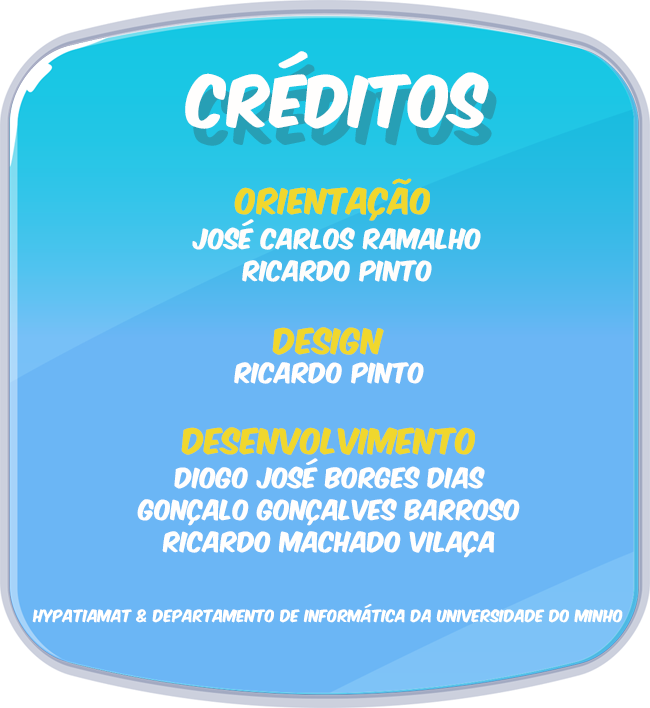
<style>
.page{position:relative;width:650px;height:708px;background:#6bb6f5}
.page>*{position:absolute;margin:0}
.t1{font:60.5px "KomikaAxis";color:#fffefd}
.t2{font:63.9px "KomikaAxis";color:#279fb5;scale:0.95 1}
.t3{font:30.4px "KomikaAxis";color:#f0d72d}
.t4{font:23.8px/31.7px "KomikaAxis";color:#fefdfb}
.t5{font:23.8px "KomikaAxis";color:#fffefd}
.t6{font:23.8px/31.7px "KomikaAxis";color:#fffefd}
.t7{font:14.5px "KomikaAxis";color:#fffffe}
</style>
<div class="page">
<p class="t1" style="left:185px;top:51px;width:304px;height:78px">Créditos</p>
<p class="t2" style="left:193px;top:64px;width:304px;height:82px">Créditos</p>
<p class="t3" style="left:234px;top:178px;width:196px;height:43px">Orientação</p>
<p class="t4" style="left:192px;top:219px;width:289px;height:63px;text-align:center">José carlos ramalho<br>ricardo pinto</p>
<p class="t3" style="left:272px;top:327px;width:112px;height:28px">dESIGN</p>
<p class="t5" style="left:234px;top:362px;width:190px;height:22px">rICARDO pINTO</p>
<p class="t3" style="left:181px;top:427px;width:294px;height:28px">dESENVOLVIMENTO</p>
<p class="t6" style="left:137px;top:458px;width:383px;height:100px;text-align:center">Diogo José Borges Dias<br>Gonçalo Gonçalves Barroso<br>Ricardo Machado Vilaça</p>
<p class="t7" style="left:32px;top:603px;width:591px;height:20px">Hypatiamat &amp; dEPARTAMENTO DE iNFORMÁTICA DA UNIVERSIDADE DO MINHO</p>
</div>
